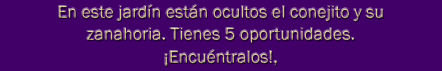
<style>
.page{position:relative;width:442px;height:71px;background:#400068}
.page>*{position:absolute;margin:0}
.t1{font:18px/22.2px "FranklinGothic-Book";color:#d4c088}
</style>
<div class="page">
<p class="t1" style="left:59px;top:5px;width:324px;height:61px;text-align:center">En este jardín están ocultos el conejito y su <br>zanahoria. Tienes 5 oportunidades.<br>¡Encuéntralos!, <br>Observa cuidadosamente.</p>
</div>
